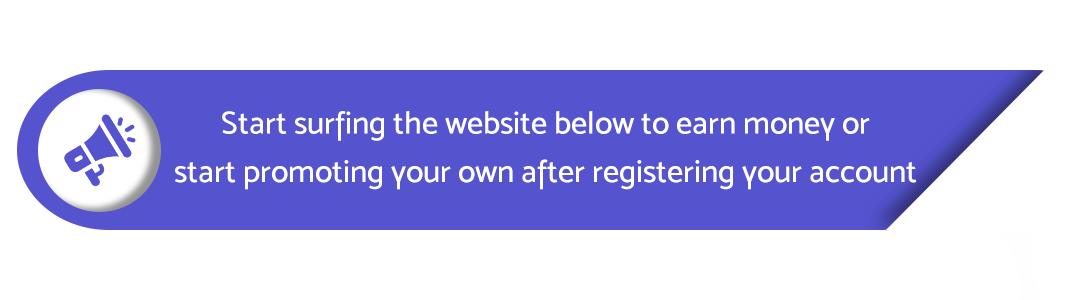
<style>
.page{position:relative;width:1080px;height:300px;background:#ffffff}
.page>*{position:absolute;margin:0}
.t1{font:31.9px/48.6px "MoskMedium500";color:#ffffff}
</style>
<div class="page">
<p class="t1" style="left:175px;top:111px;width:742px;height:79px;text-align:center">Start surfing the website below to earn money or<br>start promoting your own after registering your account</p>
</div>
